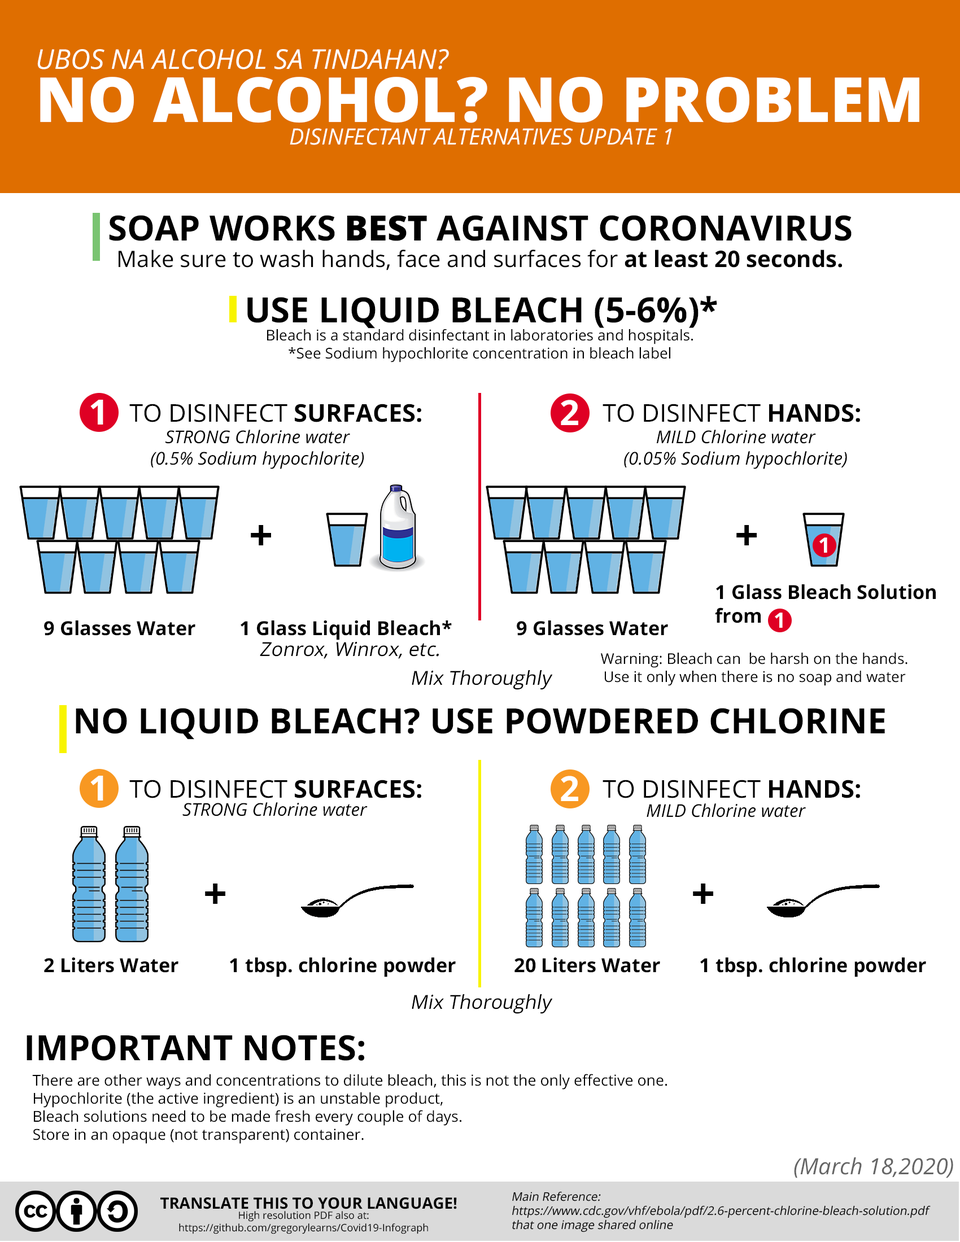
<style>
.page{position:relative;width:960px;height:1242px;background:#ffffff}
.page>*{position:absolute;margin:0}
.t1{font:27.3px "OpenSans-Italic";color:#ffffff}
.t2{font:62.1px "OpenSans-ExtraBold";color:#ffffff}
.t3{font:22.3px "OpenSans-Italic";color:#ffffff}
.t4{font:34.7px "OpenSans-Bold";color:#000000}
.t5{font:34.7px "OpenSans-ExtraBold";color:#000000}
.t6{font:22.7px "OpenSans-Regular";color:#000000}
.t7{font:22.7px "OpenSans-Bold";color:#000000}
.t8{font:14.9px "OpenSans-Regular";color:#000000}
.t9{font:34.7px "OpenSans-Bold";color:#ffffff}
.t10{font:24.5px "OpenSans-Regular";color:#000000}
.t11{font:24.5px "OpenSans-Bold";color:#000000}
.t12{font:17.7px "OpenSans-Italic";color:#000000}
.t13{font:41.9px "OpenSans-Bold";color:#000000}
.t14{font:21.1px "OpenSans-Bold";color:#ffffff}
.t15{font:19.4px "OpenSans-Bold";color:#000000}
.t16{font:19.4px "OpenSans-Regular";color:#000000;font-style:italic}
.t17{font:15.1px "OpenSans-Regular";color:#000000}
.t18{font:22.3px "OpenSans-Italic";color:#656565}
.t19{font:11.8px "OpenSans-Regular";color:#000000;font-style:italic}
.t20{font:15.7px "OpenSans-Bold";color:#000000}
.t21{font:10.2px "OpenSans-Regular";color:#000000}
</style>
<div class="page">
<p class="t1" style="left:37px;top:49px;width:412px;height:20px">UBOS NA ALCOHOL SA TINDAHAN?</p>
<p class="t2" style="left:40px;top:77px;width:879px;height:46px">NO ALCOHOL? NO PROBLEM</p>
<p class="t3" style="left:290px;top:128px;width:382px;height:17px">DISINFECTANT ALTERNATIVES UPDATE 1</p>
<p class="t4" style="left:109px;top:215px;width:742px;height:26px">SOAP WORKS <span class="t5">BEST</span> AGAINST CORONAVIRUS</p>
<p class="t6" style="left:119px;top:250px;width:723px;height:20px">Make sure to wash hands, face and surfaces for <span class="t7">at least 20 seconds.</span></p>
<p class="t4" style="left:247px;top:296px;width:470px;height:33px">USE LIQUID BLEACH (5-6%)*</p>
<p class="t8" style="left:267px;top:329px;width:426px;height:34px;text-align:center">Bleach is a standard disinfectant in laboratories and hospitals.<br>*See Sodium hypochlorite concentration in bleach label</p>
<p class="t9" style="left:90px;top:400px;width:13px;height:25px">1</p>
<p class="t9" style="left:561px;top:400px;width:17px;height:25px">2</p>
<p class="t10" style="left:129px;top:404px;width:292px;height:18px">TO DISINFECT<span class="t11"> SURFACES:</span></p>
<p class="t10" style="left:602px;top:404px;width:258px;height:18px">TO DISINFECT<span class="t11"> HANDS:</span></p>
<p class="t12" style="left:151px;top:430px;width:213px;height:39px;text-align:center">STRONG Chlorine water<br>(0.5% Sodium hypochlorite)</p>
<p class="t12" style="left:624px;top:430px;width:223px;height:39px;text-align:center">MILD Chlorine water<br>(0.05% Sodium hypochlorite)</p>
<p class="t13" style="left:251px;top:525px;width:20px;height:20px">+</p>
<p class="t13" style="left:736px;top:525px;width:21px;height:20px">+</p>
<p class="t14" style="left:819px;top:538px;width:8px;height:15px">1</p>
<p class="t15" style="left:715px;top:584px;width:221px;height:39px">1 Glass Bleach Solution from</p>
<p class="t14" style="left:775px;top:613px;width:8px;height:15px">1</p>
<p class="t15" style="left:44px;top:621px;width:151px;height:15px">9 Glasses Water</p>
<p class="t15" style="left:241px;top:621px;width:211px;height:19px">1 Glass Liquid Bleach*</p>
<p class="t15" style="left:517px;top:621px;width:151px;height:15px">9 Glasses Water</p>
<p class="t16" style="left:260px;top:641px;width:179px;height:18px">Zonrox, Winrox, etc.</p>
<p class="t8" style="left:601px;top:653px;width:306px;height:33px;text-align:center">Warning: Bleach can  be harsh on the hands. Use it only when there is no soap and water</p>
<p class="t16" style="left:412px;top:670px;width:141px;height:20px">Mix Thoroughly</p>
<p class="t4" style="left:76px;top:708px;width:809px;height:32px">NO LIQUID BLEACH? USE POWDERED CHLORINE</p>
<p class="t9" style="left:90px;top:776px;width:13px;height:25px">1</p>
<p class="t10" style="left:129px;top:780px;width:292px;height:18px">TO DISINFECT<span class="t11"> SURFACES:</span></p>
<p class="t9" style="left:561px;top:776px;width:17px;height:25px">2</p>
<p class="t10" style="left:602px;top:780px;width:258px;height:18px">TO DISINFECT<span class="t11"> HANDS:</span></p>
<p class="t12" style="left:182px;top:802px;width:186px;height:14px">STRONG Chlorine water</p>
<p class="t12" style="left:647px;top:804px;width:159px;height:14px">MILD Chlorine water</p>
<p class="t13" style="left:205px;top:884px;width:20px;height:20px">+</p>
<p class="t13" style="left:693px;top:884px;width:20px;height:20px">+</p>
<p class="t15" style="left:44px;top:958px;width:134px;height:15px">2 Liters Water</p>
<p class="t15" style="left:230px;top:958px;width:226px;height:19px">1 tbsp. chlorine powder</p>
<p class="t15" style="left:514px;top:958px;width:146px;height:15px">20 Liters Water</p>
<p class="t15" style="left:700px;top:958px;width:226px;height:19px">1 tbsp. chlorine powder</p>
<p class="t16" style="left:412px;top:994px;width:141px;height:20px">Mix Thoroughly</p>
<p class="t4" style="left:27px;top:1035px;width:337px;height:26px">IMPORTANT NOTES:</p>
<p class="t17" style="left:32px;top:1074px;width:635px;height:70px">There are other ways and concentrations to dilute bleach, this is not the only effective one.<br>Hypochlorite (the active ingredient) is an unstable product, <br>Bleach solutions need to be made fresh every couple of days. <br>Store in an opaque (not transparent) container.</p>
<p class="t18" style="left:794px;top:1158px;width:159px;height:20px">(March 18,2020)</p>
<p class="t19" style="left:512px;top:1191px;width:419px;height:42px">Main Reference:<br>https://www.cdc.gov/vhf/ebola/pdf/2.6-percent-chlorine-bleach-solution.pdf<br>that one image shared online</p>
<p class="t20" style="left:160px;top:1198px;width:297px;height:11px">TRANSLATE THIS TO YOUR LANGUAGE!</p>
<p class="t21" style="left:179px;top:1211px;width:249px;height:23px;text-align:center">High resolution PDF also at:<br>https://github.com/gregorylearns/Covid19-Infograph</p>
</div>
